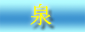
<style>
.page{position:relative;width:85px;height:32px}
.page>*{position:absolute;margin:0}
.t1{font:23.4px "MS-Mincho";color:#ffff00}
</style>
<div class="page">
<p class="t1" style="left:30px;top:3px;width:22px;height:23px">泉</p>
</div>
